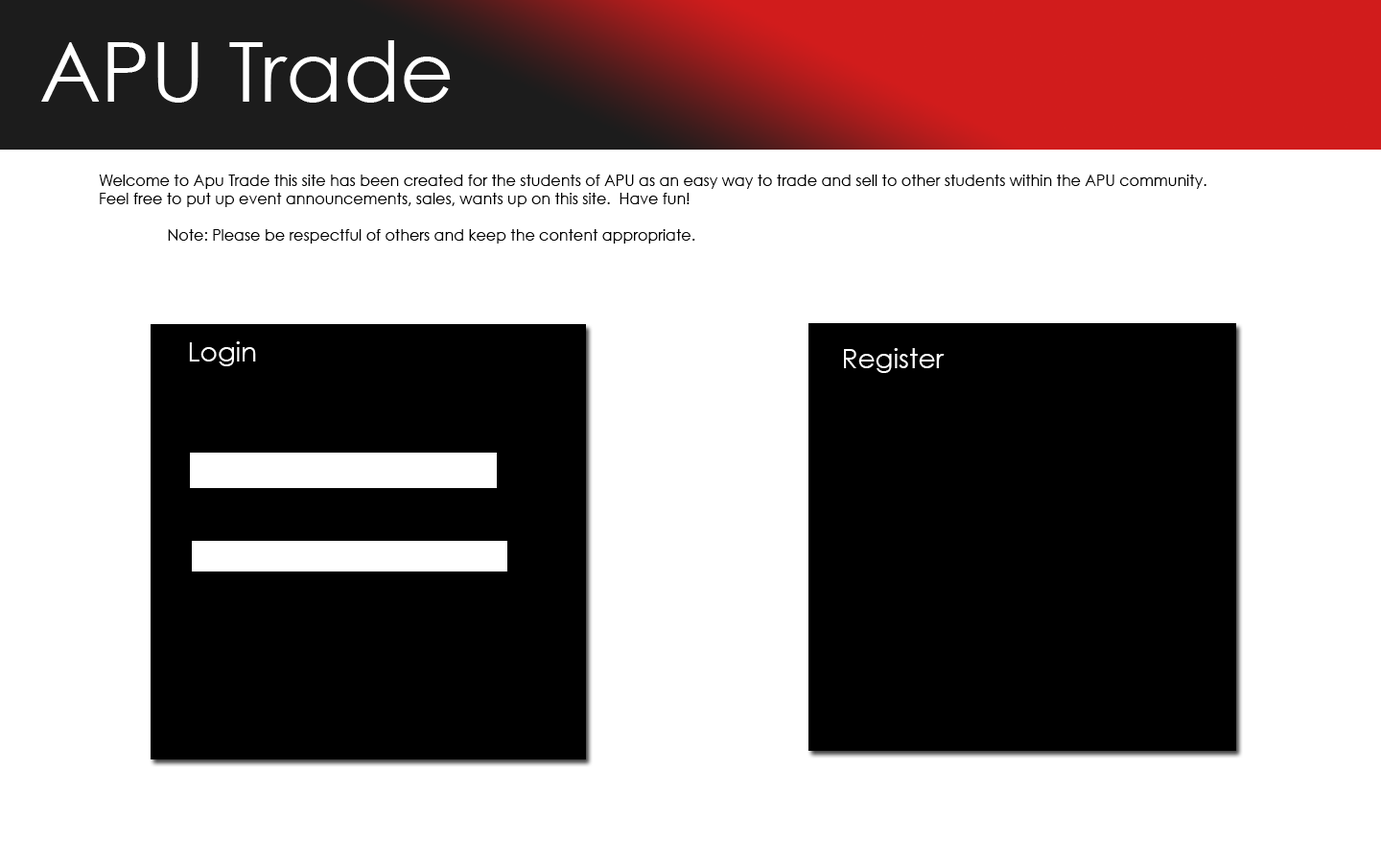
<style>
.page{position:relative;width:1381px;height:863px;background:#ffffff}
.page>*{position:absolute;margin:0}
.t1{font:83.5px "CenturyGothic";color:#ffffff}
.t2{font:15.2px "CenturyGothic";color:#000000}
.t3{font:26.9px "CenturyGothic";color:#ffffff}
</style>
<div class="page">
<p class="t1" style="left:41px;top:40px;width:410px;height:63px">APU Trade</p>
<p class="t2" style="left:99px;top:175px;width:1108px;height:69px">Welcome to Apu Trade this site has been created for the students of APU as an easy way to trade and sell to other students within the APU community. <br>Feel free to put up event announcements, sales, wants up on this site.  Have fun!<br><br> Note: Please be respectful of others and keep the content appropriate.</p>
<p class="t3" style="left:189px;top:341px;width:67px;height:25px">Login</p>
<p class="t3" style="left:844px;top:348px;width:101px;height:25px">Register</p>
</div>
